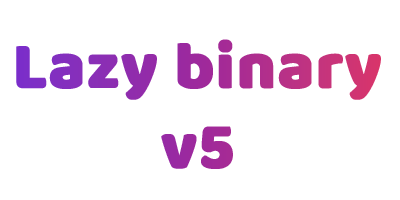
<style>
.page{position:relative;width:400px;height:200px;background:#ffffff}
.page>*{position:absolute;margin:0}
.t1{font:66.7px "BalooCyrillic";font-weight:bold}
</style>
<div class="page">
<p class="t1" style="left:16px;top:39px;width:365px;height:130px;text-align:center">Lazy binary<br>v5</p>
</div>
